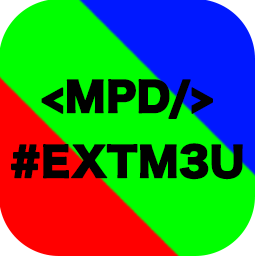
<style>
.page{position:relative;width:256px;height:256px;background:#00ff00}
.page>*{position:absolute;margin:0}
.t1{font:39.5px/65px "HiraKakuStdN-W8";color:#000000;text-transform:uppercase;font-weight:bold}
</style>
<div class="page">
<p class="t1" style="left:11px;top:79px;width:232px;height:101px;text-align:center">&lt;MPD/&gt;<br>#EXTM3U</p>
</div>
